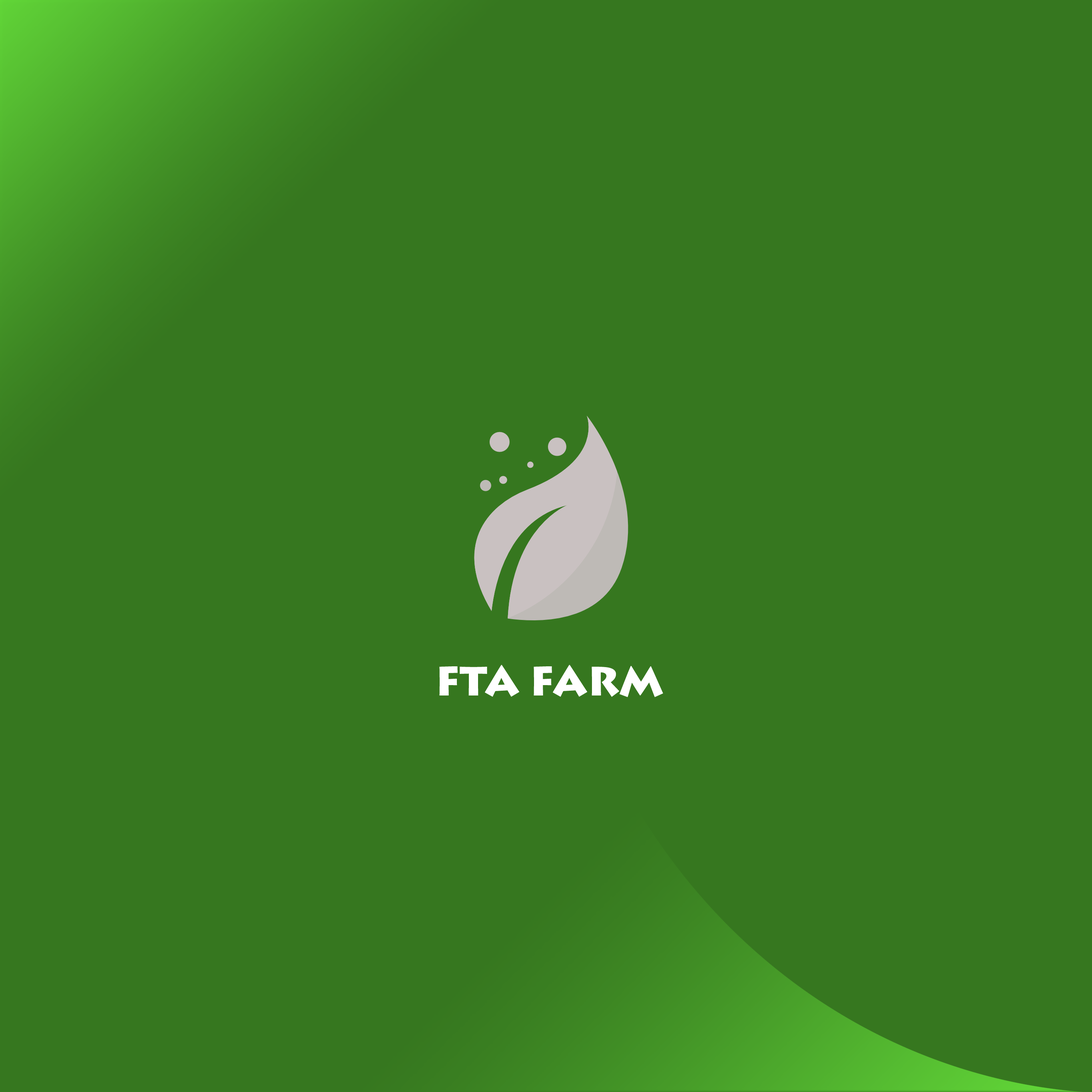
<style>
.page{position:relative;width:1092px;height:1092px;background:#36771f}
.page>*{position:absolute;margin:0}
.t1{font:40.8px "LithosPro-Black";color:#ffffff}
</style>
<div class="page">
<p class="t1" style="left:439px;top:665px;width:224px;height:32px">FTA FARM</p>
</div>
